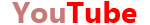
<style>
.page{position:relative;width:150px;height:25px;background:#ffffff}
.page>*{position:absolute;margin:0}
.t1{font:30px "Ebrima-Bold";color:#ff0000}
.t2{font:30px "Ebrima-Bold";color:#ca7979}
</style>
<div class="page">
<p class="t1" style="left:12px;top:1px;width:125px;height:22px"><span class="t2">You</span>Tube</p>
</div>
